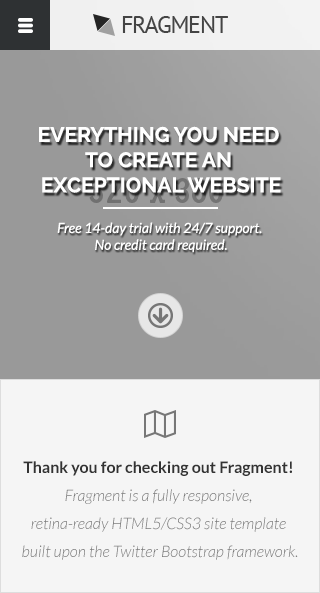
<style>
.page{position:relative;width:320px;height:593px;background:#f5f5f5}
.page>*{position:absolute;margin:0}
.t1{font:24px "PTSans-Regular";letter-spacing:-0.05em;color:#444444;text-transform:uppercase}
.t2{font:21px "Raleway-Bold";color:#ffffff;text-transform:uppercase}
.t3{font:14px "Lato-Italic";color:#ffffff}
.t4{font:16px/28px "Lato-LightItalic";color:#777777}
.t5{font:16px/28px "Lato-Bold";color:#333333}
</style>
<div class="page">
<p class="t1" style="left:122px;top:16px;width:106px;height:17px">Fragment</p>
<p class="t2" style="left:39px;top:126px;width:242px;height:67px;text-align:center">Everything you need <br>to create an <br>exceptional website</p>
<p class="t3" style="left:57px;top:222px;width:205px;height:31px;text-align:center">Free 14-day trial with 24/7 support. <br>No credit card required.</p>
<p class="t4" style="left:22px;top:461px;width:276px;height:99px;text-align:center"><span class="t5">Thank you for checking out Fragment! <br></span>Fragment is a fully responsive, <br>retina-ready HTML5/CSS3 site template <br>built upon the Twitter Bootstrap framework.</p>
</div>
